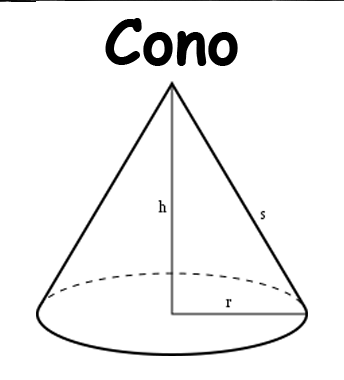
<style>
.page{position:relative;width:344px;height:380px;background:#ffffff}
.page>*{position:absolute;margin:0}
.t1{font:62px "ComicSansMS-Bold";color:#000000}
</style>
<div class="page">
<p class="t1" style="left:105px;top:17px;width:133px;height:48px">Cono</p>
</div>
